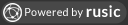
<style>
.page{position:relative;width:128px;height:25px;background:#484848}
.page>*{position:absolute;margin:0}
.t1{font:11px "Lato-Regular";letter-spacing:0.025em;color:#ffffff}
.t2{font:15.5px "Lato-Bold";letter-spacing:0.025em;color:#ffffff}
</style>
<div class="page">
<p class="t1" style="left:25px;top:5px;width:96px;height:13px">Powered by <span class="t2">rusic</span></p>
</div>
